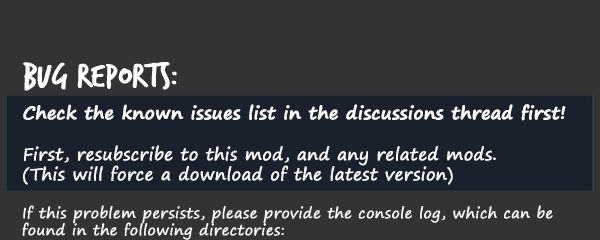
<style>
.page{position:relative;width:600px;height:240px;background:#333333}
.page>*{position:absolute;margin:0}
.t1{font:35.2px "TrashHand";color:#ffffff;font-weight:bold}
.t2{font:16.7px "SegoePrint";color:#ffffff;font-weight:bold}
.t3{font:17.6px "SegoePrint-Bold";color:#ffffff;font-weight:bold}
.t4{font:14.6px "SegoePrint";color:#ffffff;font-weight:bold}
</style>
<div class="page">
<p class="t1" style="left:23px;top:62px;width:154px;height:29px">Bug Reports:</p>
<p class="t2" style="left:23px;top:104px;width:543px;height:81px"><span class="t3">Check the known issues list in the discussions thread first!<br><br></span>First, resubscribe to this mod, and any related mods. <br>(This will force a download of the latest version)</p>
<p class="t4" style="left:22px;top:205px;width:531px;height:35px">If this problem persists, please provide the console log, which can be <br>found in the following directories:</p>
</div>
